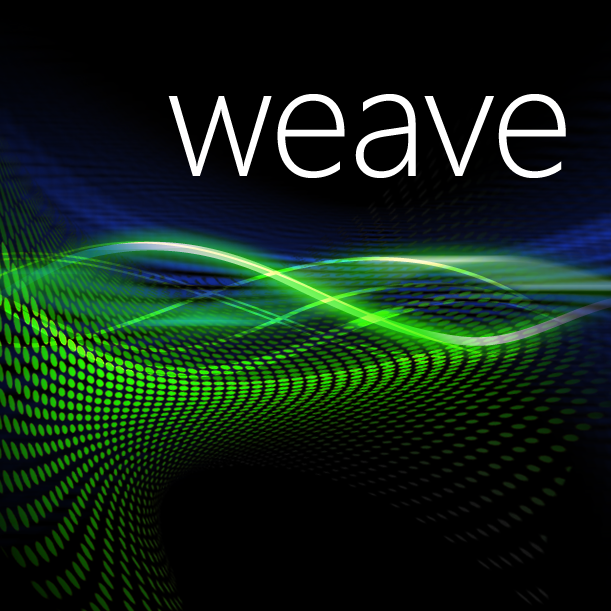
<style>
.page{position:relative;width:611px;height:611px;background:#000000}
.page>*{position:absolute;margin:0}
.t1{font:160px "SegoeWP-Light";letter-spacing:-0.023em;color:#ffffff}
</style>
<div class="page">
<p class="t1" style="left:168px;top:94px;width:398px;height:84px">weave</p>
</div>
